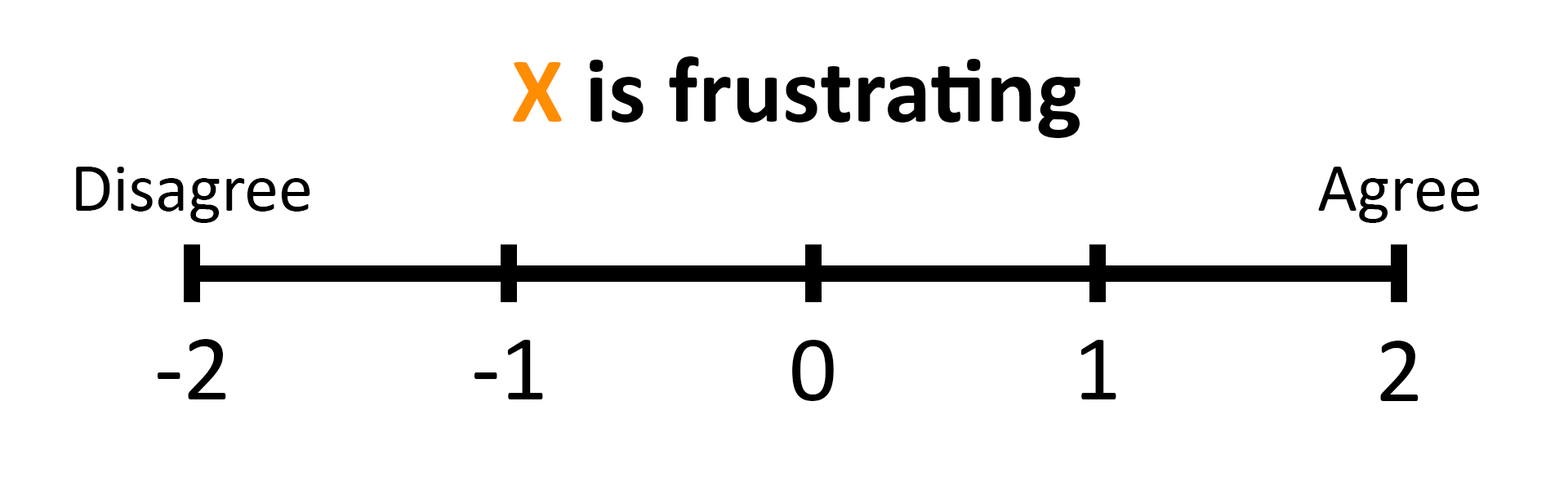
<style>
.page{position:relative;width:1568px;height:477px;background:#ffffff}
.page>*{position:absolute;margin:0}
.t1{font:95.1px "Calibri-Bold";color:#000000}
.t2{font:95.1px "Calibri-Bold";color:#ff8d01}
.t3{font:69.1px "Calibri";color:#000000}
.t4{font:95.1px "Calibri";color:#000000}
</style>
<div class="page">
<p class="t1" style="left:513px;top:56px;width:567px;height:82px"><span class="t2">X</span> is frustrating</p>
<p class="t3" style="left:76px;top:167px;width:234px;height:56px">Disagree</p>
<p class="t3" style="left:1318px;top:167px;width:162px;height:56px">Agree</p>
<p class="t4" style="left:157px;top:339px;width:69px;height:60px">-2</p>
<p class="t4" style="left:474px;top:340px;width:69px;height:59px">-1</p>
<p class="t4" style="left:792px;top:340px;width:42px;height:61px">0</p>
<p class="t4" style="left:1080px;top:340px;width:36px;height:59px">1</p>
<p class="t4" style="left:1380px;top:341px;width:39px;height:60px">2</p>
</div>
